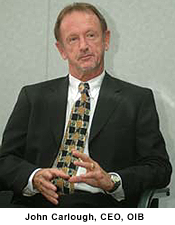
<style>
.page{position:relative;width:175px;height:225px}
.page>*{position:absolute;margin:0}
.t1{font:9px "Arial-BoldMT";letter-spacing:0.05em;color:#000000}
</style>
<div class="page">
<p class="t1" style="left:25px;top:213px;width:119px;height:9px">John Carlough, CEO, OIB</p>
</div>
